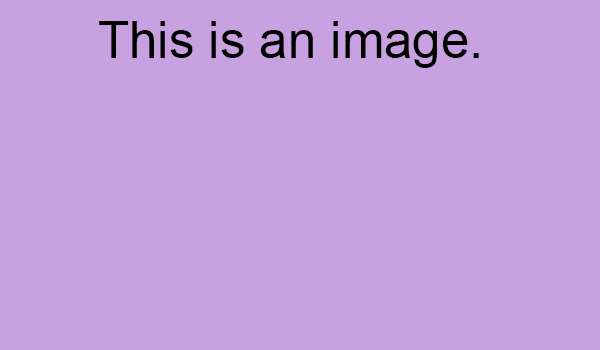
<style>
.page{position:relative;width:600px;height:350px;background:#c8a1e0}
.page>*{position:absolute;margin:0}
.t1{font:51px "ArialMT";color:#000000}
</style>
<div class="page">
<p class="t1" style="left:99px;top:21px;width:380px;height:47px">This is an image.</p>
</div>
